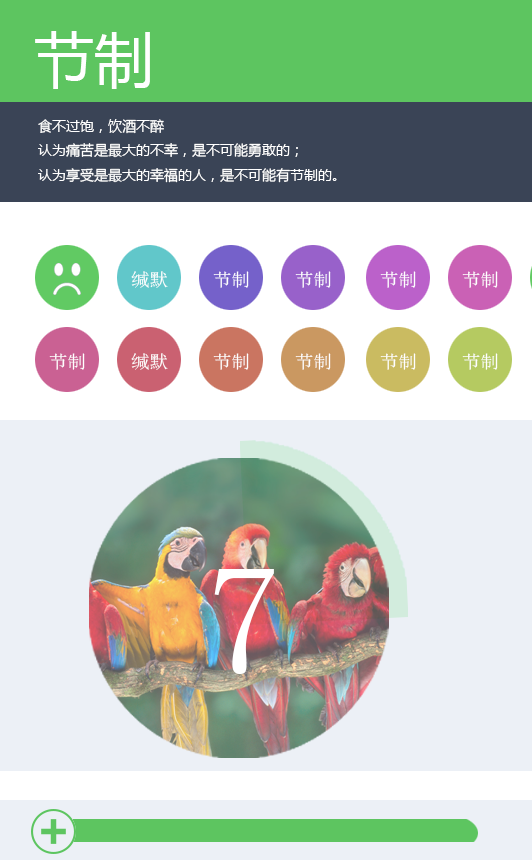
<style>
.page{position:relative;width:532px;height:860px;background:#ecf0f6}
.page>*{position:absolute;margin:0}
.t1{font:60px "MicrosoftYaHei";color:#ffffff}
.t2{font:14px "MicrosoftYaHei";color:#ffffff}
.t3{font:17.9px "SimSun";color:#ffffff;scale:1.03 1}
.t4{font:155.5px "SimSun";color:#ffffff}
</style>
<div class="page">
<p class="t1" style="left:35px;top:31px;width:115px;height:58px">节制</p>
<p class="t2" style="left:38px;top:119px;width:126px;height:15px">食不过饱，饮酒不醉</p>
<p class="t2" style="left:38px;top:143px;width:299px;height:40px">认为痛苦是最大的不幸，是不可能勇敢的；<br>认为享受是最大的幸福的人，是不可能有节制的。</p>
<p class="t3" style="left:131px;top:271px;width:37px;height:17px">缄默</p>
<p class="t3" style="left:213px;top:271px;width:36px;height:17px">节制</p>
<p class="t3" style="left:295px;top:271px;width:36px;height:17px">节制</p>
<p class="t3" style="left:380px;top:271px;width:36px;height:17px">节制</p>
<p class="t3" style="left:462px;top:271px;width:36px;height:17px">节制</p>
<p class="t3" style="left:49px;top:353px;width:36px;height:17px">节制</p>
<p class="t3" style="left:131px;top:353px;width:37px;height:17px">缄默</p>
<p class="t3" style="left:213px;top:353px;width:36px;height:17px">节制</p>
<p class="t3" style="left:295px;top:353px;width:36px;height:17px">节制</p>
<p class="t3" style="left:380px;top:353px;width:36px;height:17px">节制</p>
<p class="t3" style="left:462px;top:353px;width:36px;height:17px">节制</p>
<p class="t4" style="left:214px;top:569px;width:60px;height:105px">7</p>
</div>
